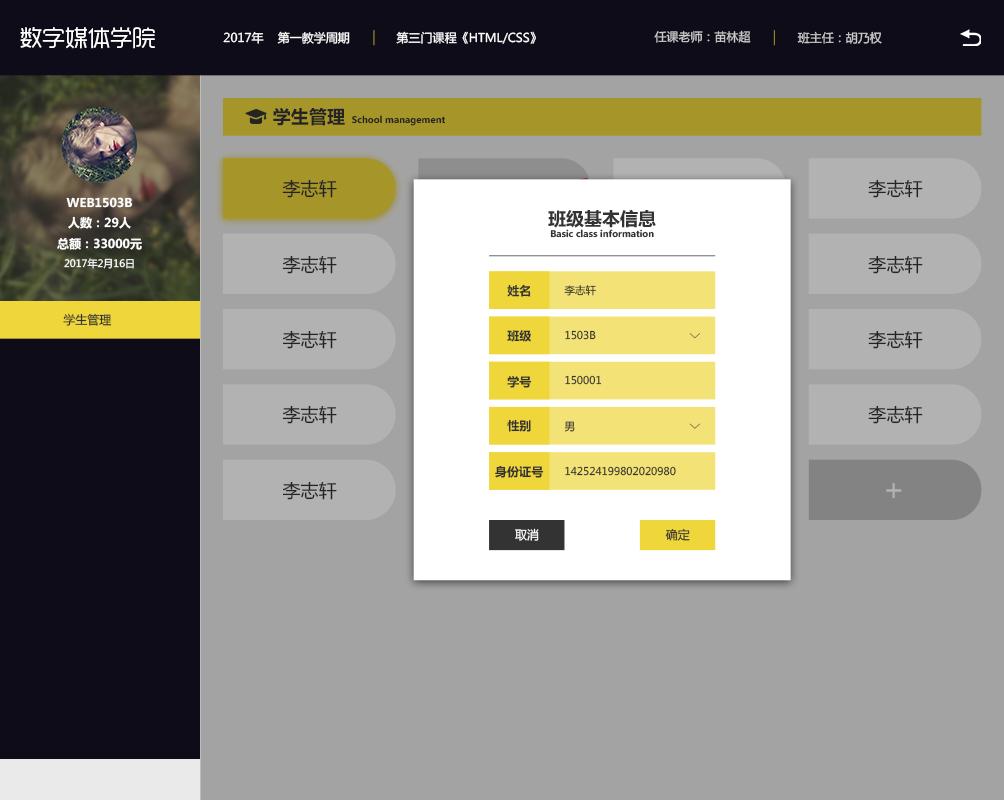
<style>
.page{position:relative;width:1004px;height:800px;background:#a3a3a3}
.page>*{position:absolute;margin:0}
.t1{font:22.6px "RTWSYueGoTrial-Regular";color:#ffffff}
.t2{font:12px "MicrosoftYaHei";color:#cdcccd}
.t3{font:12px "MicrosoftYaHei";color:#ffffff}
.t4{font:18.1px "MicrosoftYaHei-Bold";color:#333333}
.t5{font:9px "MicrosoftYaHei-Bold";color:#333333}
.t6{font:18.1px "MicrosoftYaHei";color:#333333}
.t7{font:12px "MicrosoftYaHei-Bold";color:#ffffff}
.t8{font:18px "MicrosoftYaHei-Bold";color:#333333}
.t9{font:10px "MicrosoftYaHei";color:#ffffff}
.t10{font:12px "MicrosoftYaHei-Bold";color:#333333}
.t11{font:10.6px "MicrosoftYaHei";color:#333333}
.t12{font:12px "MicrosoftYaHei";color:#333333}
.t13{font:10.6px "MicrosoftYaHei"}
.t14{font:30.1px "MicrosoftYaHei";color:#b2b2b2}
.t15{font:12px "MicrosoftYaHei";color:#fffefe}
</style>
<div class="page">
<p class="t1" style="left:20px;top:27px;width:135px;height:22px">数字媒体学院</p>
<p class="t2" style="left:654px;top:30px;width:97px;height:13px">任课老师：苗林超</p>
<p class="t3" style="left:223px;top:31px;width:127px;height:13px">2017年    第一教学周期</p>
<p class="t3" style="left:396px;top:31px;width:140px;height:13px">第三门课程《HTML/CSS》</p>
<p class="t2" style="left:797px;top:31px;width:85px;height:13px">班主任：胡乃权</p>
<p class="t4" style="left:273px;top:108px;width:72px;height:18px">学生管理</p>
<p class="t5" style="left:352px;top:115px;width:94px;height:11px">School management</p>
<p class="t6" style="left:282px;top:179px;width:55px;height:19px">李志轩</p>
<p class="t6" style="left:868px;top:179px;width:55px;height:19px">李志轩</p>
<p class="t7" style="left:66px;top:197px;width:67px;height:11px">WEB1503B</p>
<p class="t7" style="left:57px;top:216px;width:85px;height:34px;text-align:center">人数：29人<br>总额：33000元</p>
<p class="t8" style="left:548px;top:210px;width:108px;height:18px">班级基本信息</p>
<p class="t5" style="left:550px;top:229px;width:104px;height:9px">Basic class information</p>
<p class="t6" style="left:282px;top:255px;width:55px;height:19px">李志轩</p>
<p class="t6" style="left:868px;top:255px;width:55px;height:19px">李志轩</p>
<p class="t9" style="left:64px;top:258px;width:70px;height:11px">2017年2月16日</p>
<p class="t10" style="left:507px;top:284px;width:24px;height:13px">姓名</p>
<p class="t11" style="left:564px;top:285px;width:32px;height:11px">李志轩</p>
<p class="t12" style="left:63px;top:313px;width:49px;height:13px">学生管理</p>
<p class="t6" style="left:282px;top:330px;width:55px;height:19px">李志轩</p>
<p class="t10" style="left:507px;top:330px;width:24px;height:12px">班级</p>
<p class="t11" style="left:565px;top:330px;width:31px;height:10px">1503B</p>
<p class="t6" style="left:868px;top:330px;width:55px;height:19px">李志轩</p>
<p class="t10" style="left:507px;top:376px;width:25px;height:12px">学号</p>
<p class="t11" style="left:565px;top:375px;width:37px;height:10px">150001</p>
<p class="t6" style="left:282px;top:405px;width:55px;height:19px">李志轩</p>
<p class="t6" style="left:868px;top:405px;width:55px;height:19px">李志轩</p>
<p class="t10" style="left:507px;top:419px;width:24px;height:13px">性别</p>
<p class="t13" style="left:564px;top:421px;width:11px;height:11px">男</p>
<p class="t10" style="left:495px;top:465px;width:49px;height:13px">身份证号</p>
<p class="t11" style="left:565px;top:466px;width:111px;height:10px">142524199802020980</p>
<p class="t6" style="left:282px;top:481px;width:55px;height:19px">李志轩</p>
<p class="t14" style="left:886px;top:483px;width:16px;height:15px">+</p>
<p class="t15" style="left:515px;top:528px;width:24px;height:13px">取消</p>
<p class="t12" style="left:665px;top:528px;width:25px;height:13px">确定</p>
</div>
